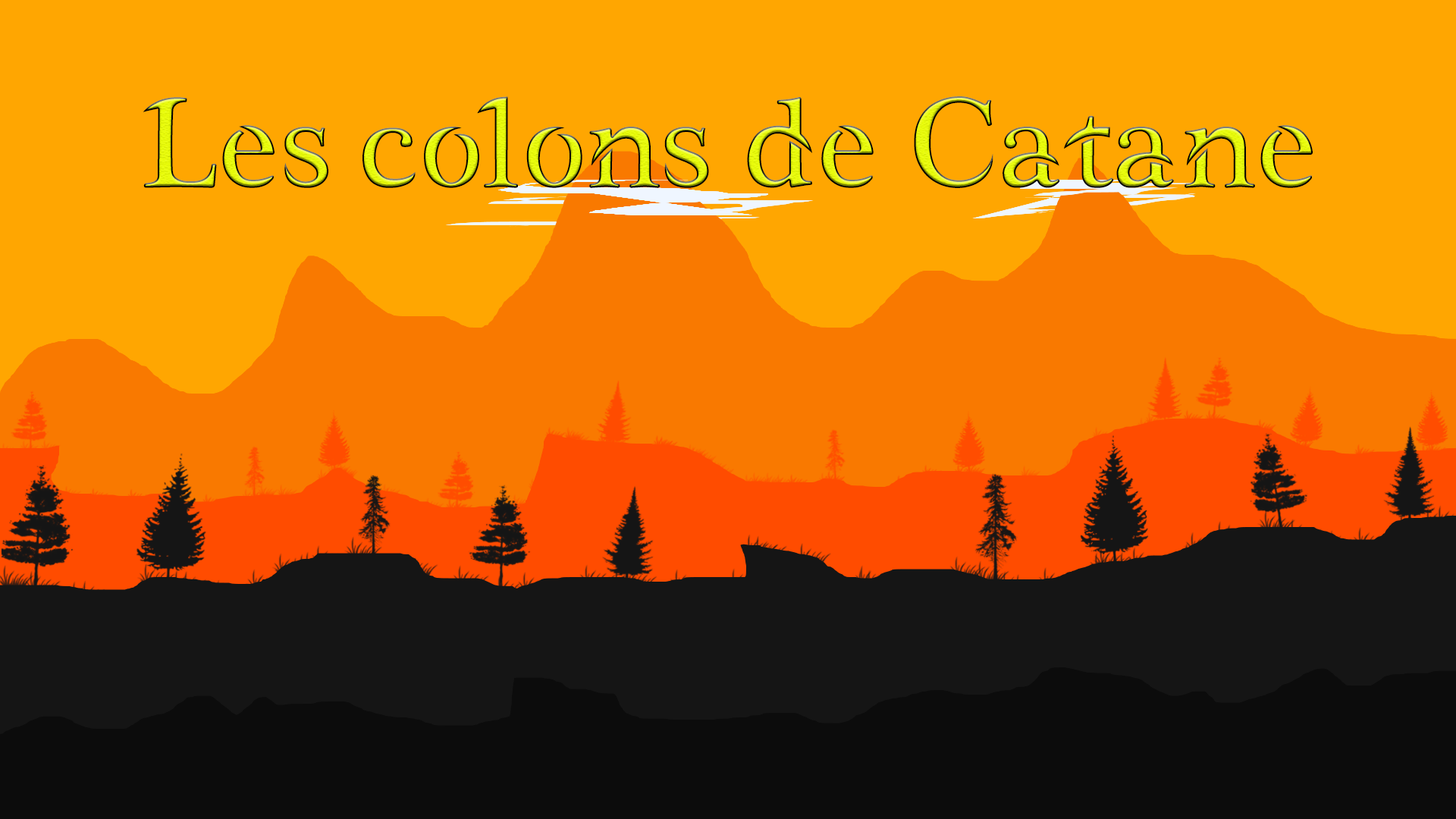
<style>
.page{position:relative;width:1456px;height:819px;background:#ffa601}
.page>*{position:absolute;margin:0}
.t1{font:91px "Akbaal"}
</style>
<div class="page">
<p class="t1" style="left:143px;top:96px;width:1170px;height:92px">Les colons de Catane</p>
</div>
